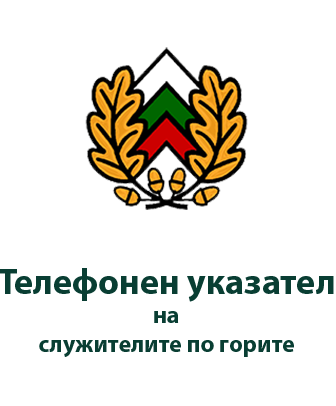
<style>
.page{position:relative;width:336px;height:406px;background:#ffffff}
.page>*{position:absolute;margin:0}
.t1{font:24px "MyriadPro-Bold";color:#093e33}
.t2{font:36px "MyriadPro-Bold";color:#093e33}
</style>
<div class="page">
<p class="t1" style="left:0px;top:268px;width:334px;height:89px;text-align:center"><span class="t2">Телефонен указател<br></span>на<br>служителите по горите</p>
</div>
